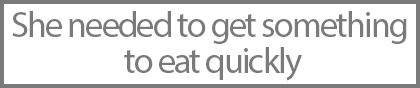
<style>
.page{position:relative;width:420px;height:88px;background:#ffffff}
.page>*{position:absolute;margin:0}
.t1{font:36px/36px "MyriadPro-Regular";letter-spacing:-0.05em;color:#7a7a7a}
</style>
<div class="page">
<p class="t1" style="left:12px;top:11px;width:395px;height:70px;text-align:center">She needed to get something <br>to eat quickly</p>
</div>
